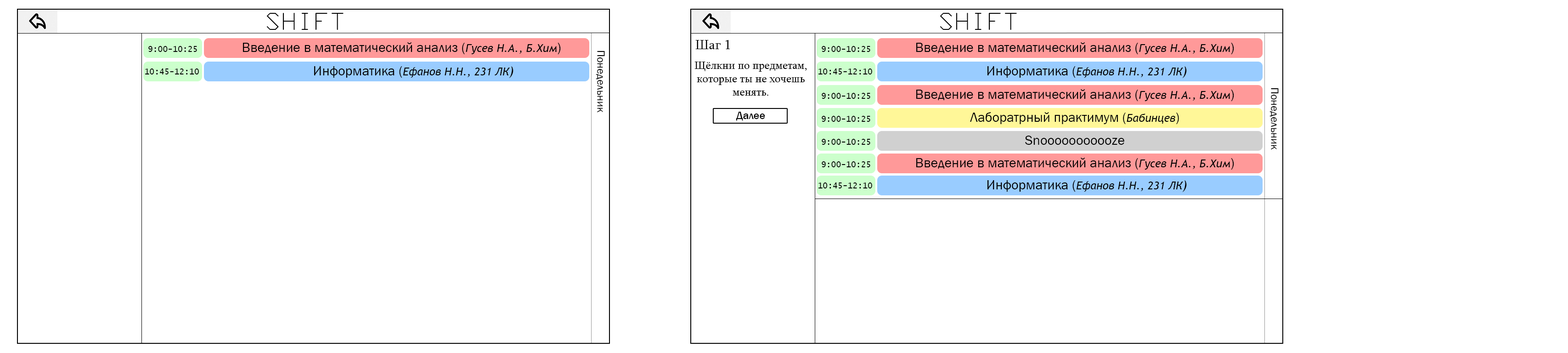
<style>
.page{position:relative;width:1568px;height:353px;background:#ffffff}
.page>*{position:absolute;margin:0}
.t1{font:22px "SWMono";color:#000000}
.t2{font:13.8px "Sylfaen";color:#000000}
.t3{font:8.3px "LucidaConsole";color:#000000}
.t4{font:13.8px "FranklinGothic-Book";color:#000000}
.t5{font:11px "TrebuchetMS-Italic";color:#000000}
.t6{font:11px "FranklinGothic-Book";color:#000000}
.t7{font:11px "Sylfaen";color:#000000}
.t8{font:12.9px "TrebuchetMS-Italic";color:#000000}
.t9{font:11px "FranklinGothic-Medium";color:#000000}
</style>
<div class="page">
<p class="t1" style="left:267px;top:13px;width:77px;height:17px">SHIFT</p>
<p class="t1" style="left:940px;top:13px;width:77px;height:17px">SHIFT</p>
<p class="t1" style="left:940px;top:13px;width:77px;height:17px">SHIFT</p>
<p class="t2" style="left:695px;top:40px;width:35px;height:9px">Шаг 1</p>
<p class="t3" style="left:148px;top:46px;width:49px;height:6px">9:00-10:25</p>
<p class="t4" style="left:243px;top:42px;width:318px;height:12px">Введение в математический анализ (<span class="t5">Гусев Н.А., Б.Хим</span>)</p>
<p class="t6" style="left:596px;top:51px;width:9px;height:62px;rotate:90deg">Понедельник</p>
<p class="t3" style="left:822px;top:46px;width:48px;height:6px">9:00-10:25</p>
<p class="t3" style="left:822px;top:46px;width:48px;height:6px">9:00-10:25</p>
<p class="t4" style="left:916px;top:42px;width:318px;height:12px">Введение в математический анализ (<span class="t5">Гусев Н.А., Б.Хим</span>)</p>
<p class="t4" style="left:916px;top:42px;width:318px;height:12px">Введение в математический анализ (<span class="t5">Гусев Н.А., Б.Хим</span>)</p>
<p class="t7" style="left:694px;top:62px;width:113px;height:34px;text-align:center">Щёлкни по предметам,<br>которые ты не хочешь<br>менять.</p>
<p class="t3" style="left:145px;top:68px;width:54px;height:6px">10:45-12:10</p>
<p class="t5" style="left:314px;top:66px;width:199px;height:12px"><span class="t4">Информатика (</span>Ефанов Н.Н., 231 ЛК<span class="t8">)</span></p>
<p class="t3" style="left:818px;top:68px;width:54px;height:6px">10:45-12:10</p>
<p class="t3" style="left:818px;top:68px;width:54px;height:6px">10:45-12:10</p>
<p class="t5" style="left:987px;top:66px;width:200px;height:12px"><span class="t4">Информатика (</span>Ефанов Н.Н., 231 ЛК<span class="t8">)</span></p>
<p class="t5" style="left:987px;top:66px;width:200px;height:12px"><span class="t4">Информатика (</span>Ефанов Н.Н., 231 ЛК<span class="t8">)</span></p>
<p class="t4" style="left:916px;top:89px;width:318px;height:12px">Введение в математический анализ (<span class="t5">Гусев Н.А., Б.Хим</span>)</p>
<p class="t6" style="left:1269px;top:88px;width:10px;height:62px;rotate:90deg">Понедельник</p>
<p class="t3" style="left:822px;top:93px;width:48px;height:6px">9:00-10:25</p>
<p class="t9" style="left:736px;top:112px;width:29px;height:9px">Далее</p>
<p class="t4" style="left:970px;top:112px;width:209px;height:12px">Лаборатрный практимум (<span class="t5">Бабинцев</span>)</p>
<p class="t3" style="left:822px;top:116px;width:48px;height:6px">9:00-10:25</p>
<p class="t4" style="left:1025px;top:135px;width:99px;height:10px">Snooooooooooze</p>
<p class="t3" style="left:822px;top:139px;width:48px;height:6px">9:00-10:25</p>
<p class="t3" style="left:822px;top:161px;width:48px;height:6px">9:00-10:25</p>
<p class="t4" style="left:916px;top:158px;width:318px;height:11px">Введение в математический анализ (<span class="t5">Гусев Н.А., Б.Хим</span>)</p>
<p class="t3" style="left:818px;top:182px;width:54px;height:6px">10:45-12:10</p>
<p class="t5" style="left:987px;top:180px;width:200px;height:12px"><span class="t4">Информатика (</span>Ефанов Н.Н., 231 ЛК<span class="t8">)</span></p>
</div>
